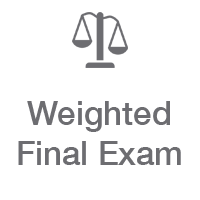
<style>
.page{position:relative;width:200px;height:200px;background:#ffffff}
.page>*{position:absolute;margin:0}
.t1{font:33px "HelveticaNeue-Medium";color:#6d6d71}
</style>
<div class="page">
<p class="t1" style="left:18px;top:101px;width:163px;height:64px;text-align:center">Weighted<br>Final Exam</p>
</div>
